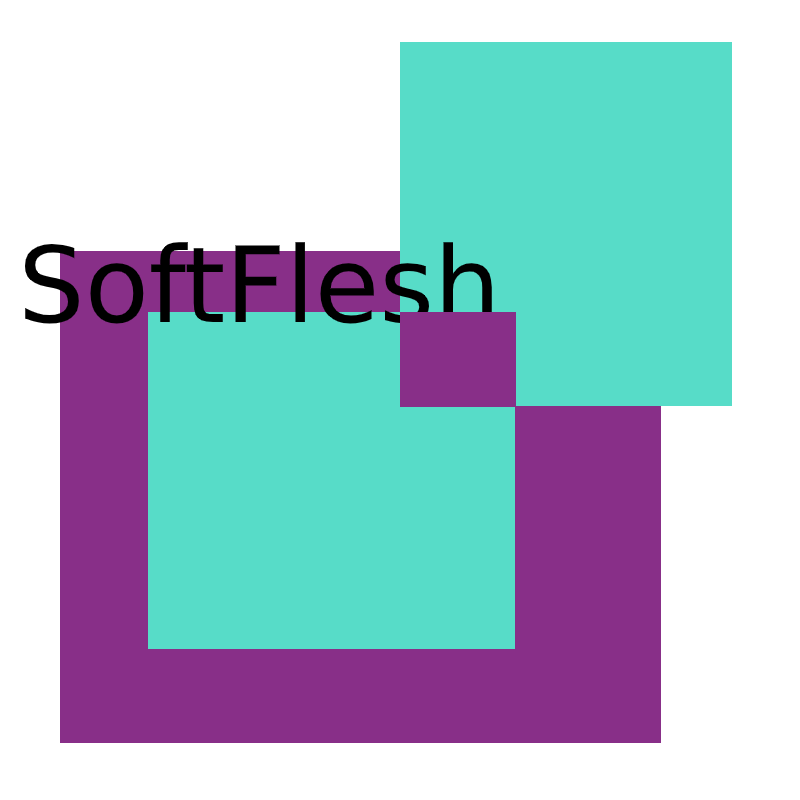
<style>
.page{position:relative;width:800px;height:800px;background:#ffffff}
.page>*{position:absolute;margin:0}
.t1{font:105px "DejaVuSans";color:#000000}
</style>
<div class="page">
<p class="t1" style="left:24px;top:242px;width:468px;height:82px">SoftFlesh</p>
</div>
